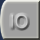
<style>
.page{position:relative;width:40px;height:40px;background:#a0a0a0}
.page>*{position:absolute;margin:0}
.t1{font:18px "MyungjoXB-HM";color:#c5c5c5}
</style>
<div class="page">
<p class="t1" style="left:10px;top:14px;width:28px;height:19px">IO</p>
</div>
